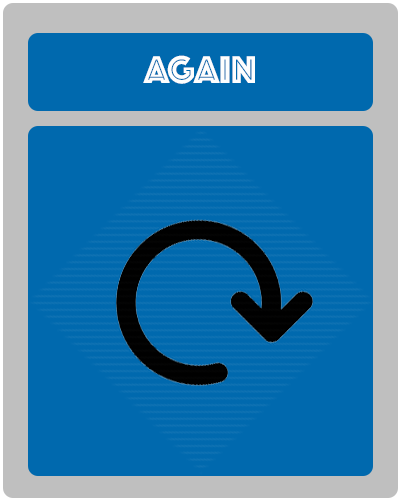
<style>
.page{position:relative;width:400px;height:500px;background:#0069ae}
.page>*{position:absolute;margin:0}
.t1{font:40px "Phosphate-Inline";color:#fefefe}
</style>
<div class="page">
<p class="t1" style="left:143px;top:55px;width:112px;height:29px">AGAIN</p>
</div>
